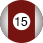
<style>
.page{position:relative;width:43px;height:43px;background:#761411}
.page>*{position:absolute;margin:0}
.t1{font:12.2px "Helvetica";color:#010101}
</style>
<div class="page">
<p class="t1" style="left:15px;top:17px;width:13px;height:9px">15</p>
</div>
